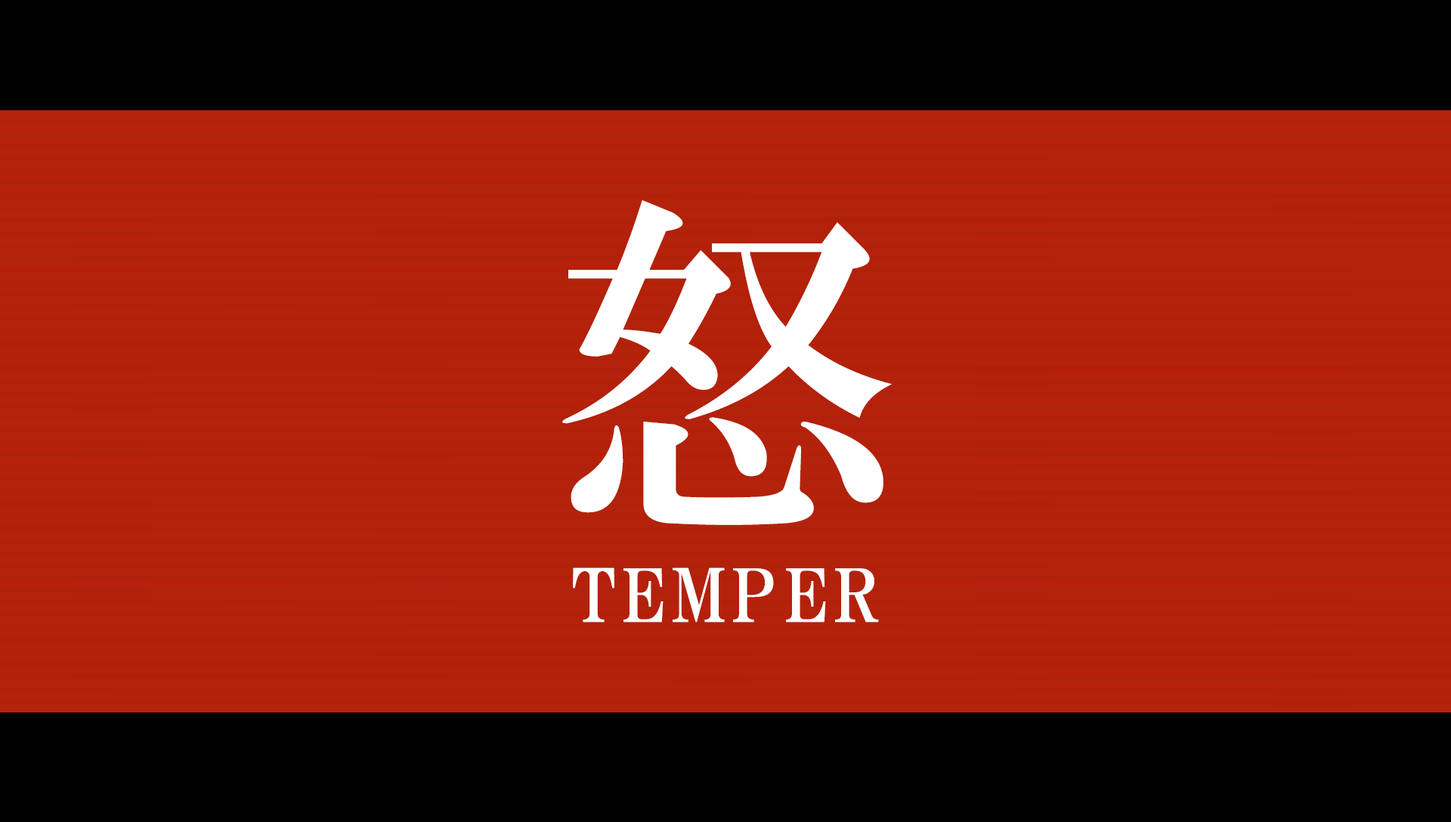
<style>
.page{position:relative;width:1451px;height:822px;background:#000000}
.page>*{position:absolute;margin:0}
.t1{font:356.5px "HGMinchoB";letter-spacing:0.025em;color:#ffffff}
.t2{font:72.5px "HGPMinchoE";letter-spacing:0.1em;color:#ffffff;text-transform:uppercase}
</style>
<div class="page">
<p class="t1" style="left:562px;top:200px;width:330px;height:325px">怒</p>
<p class="t2" style="left:573px;top:567px;width:306px;height:56px">temper</p>
</div>
